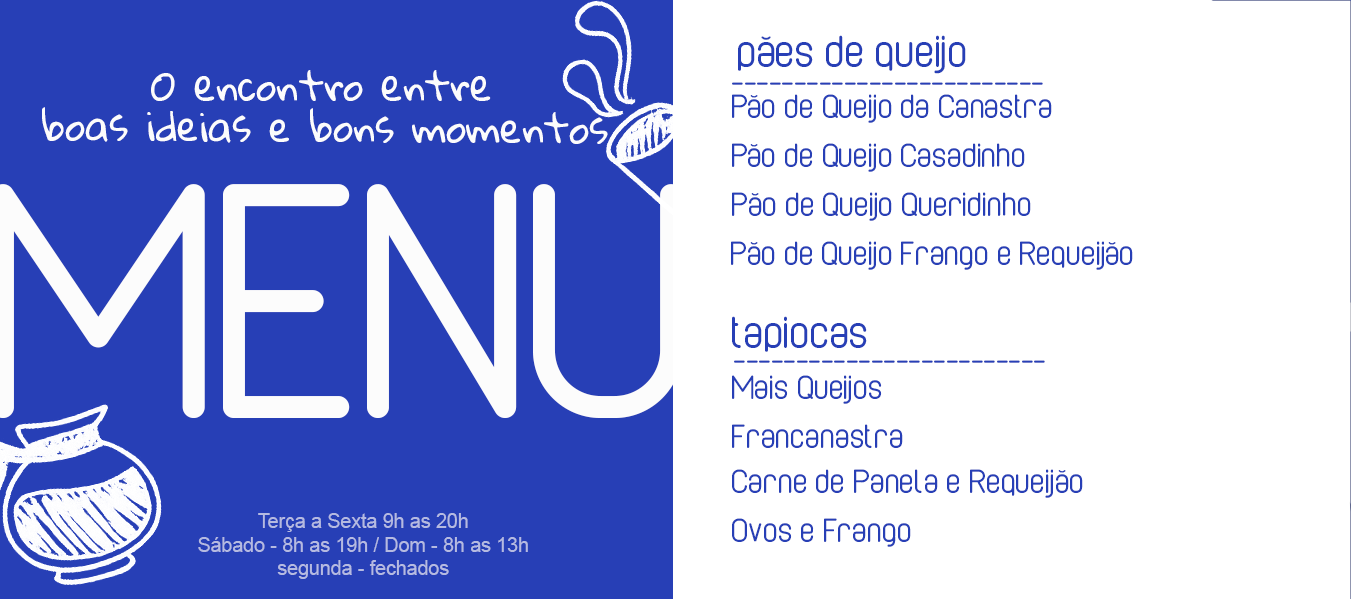
<style>
.page{position:relative;width:1351px;height:599px;background:#ffffff}
.page>*{position:absolute;margin:0}
.t1{font:48px "CaboRoundedRegularRegular";color:#273fb6}
.t2{font:39.7px "GloriaHallelujah";color:#fcfcfc}
.t3{font:36px "CaboRoundedRegularRegular";color:#273fb6}
.t4{font:19.5px "ArialMT";color:#b5bae1}
</style>
<div class="page">
<p class="t1" style="left:738px;top:35px;width:228px;height:39px">pães de queijo</p>
<p class="t2" style="left:151px;top:70px;width:340px;height:31px">O encontro entre</p>
<p class="t3" style="left:732px;top:82px;width:311px;height:3px">-------------------------</p>
<p class="t3" style="left:732px;top:94px;width:320px;height:29px">Pão de Queijo da Canastra</p>
<p class="t2" style="left:42px;top:107px;width:566px;height:37px">boas ideias e bons momentos</p>
<p class="t3" style="left:732px;top:143px;width:293px;height:29px">Pão de Queijo Casadinho</p>
<p class="t3" style="left:732px;top:192px;width:299px;height:29px">Pão de Queijo Queridinho</p>
<p class="t3" style="left:731px;top:241px;width:402px;height:29px">Pão de Queijo Frango e Requeijão</p>
<p class="t1" style="left:732px;top:316px;width:135px;height:36px">tapiocas</p>
<p class="t3" style="left:734px;top:360px;width:311px;height:3px">-------------------------</p>
<p class="t3" style="left:732px;top:375px;width:150px;height:29px">Mais Queijos</p>
<p class="t3" style="left:732px;top:424px;width:171px;height:24px">Francanastra</p>
<p class="t3" style="left:732px;top:469px;width:351px;height:29px">Carne de Panela e Requeijão</p>
<p class="t4" style="left:198px;top:513px;width:330px;height:66px;text-align:center">Terça a Sexta 9h as 20h<br>Sábado - 8h as 19h / Dom - 8h as 13h<br>segunda - fechados</p>
<p class="t3" style="left:732px;top:518px;width:179px;height:29px">Ovos e Frango</p>
</div>
